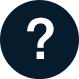
<style>
.page{position:relative;width:79px;height:79px;background:#061c2d}
.page>*{position:absolute;margin:0}
.t1{font:57px "HelveticaNeueCyr-Medium";letter-spacing:0.05em;color:#ffffff}
</style>
<div class="page">
<p class="t1" style="left:27px;top:17px;width:27px;height:42px">?</p>
</div>
